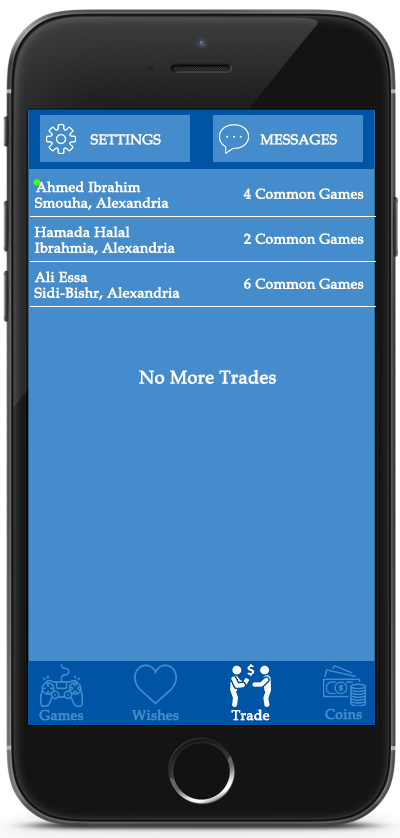
<style>
.page{position:relative;width:400px;height:838px;background:#448ccb}
.page>*{position:absolute;margin:0}
.t1{font:14px "BookAntiqua";color:#ffffff;font-weight:bold}
.t2{font:44.1px "BookAntiqua";color:#45ff0c;font-weight:bold;scale:1.06 1}
.t3{font:18px "BookAntiqua";color:#ffffff;font-weight:bold}
.t4{font:14px "BookAntiqua";color:#448ccb;font-weight:bold}
</style>
<div class="page">
<p class="t1" style="left:90px;top:134px;width:71px;height:11px">SETTINGS</p>
<p class="t1" style="left:260px;top:134px;width:77px;height:11px">MESSAGES</p>
<p class="t2" style="left:33px;top:179px;width:8px;height:7px">.</p>
<p class="t1" style="left:36px;top:181px;width:105px;height:12px">Ahmed Ibrahim</p>
<p class="t1" style="left:34px;top:197px;width:135px;height:13px">Smouha, Alexandria</p>
<p class="t1" style="left:243px;top:188px;width:121px;height:11px">4 Common Games</p>
<p class="t1" style="left:34px;top:226px;width:96px;height:12px">Hamada Halal</p>
<p class="t1" style="left:244px;top:233px;width:120px;height:11px">2 Common Games</p>
<p class="t1" style="left:35px;top:242px;width:140px;height:13px">Ibrahmia, Alexandria</p>
<p class="t1" style="left:34px;top:271px;width:54px;height:12px">Ali Essa</p>
<p class="t1" style="left:244px;top:278px;width:120px;height:11px">6 Common Games</p>
<p class="t1" style="left:34px;top:287px;width:146px;height:13px">Sidi-Bishr, Alexandria</p>
<p class="t3" style="left:139px;top:369px;width:137px;height:15px">No More Trades</p>
<p class="t4" style="left:39px;top:709px;width:45px;height:12px">Games</p>
<p class="t4" style="left:132px;top:709px;width:47px;height:12px">Wishes</p>
<p class="t1" style="left:231px;top:709px;width:39px;height:12px">Trade</p>
<p class="t4" style="left:325px;top:708px;width:37px;height:12px">Coins</p>
</div>
